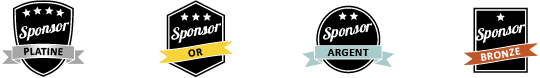
<style>
.page{position:relative;width:540px;height:78px;background:#ffffff}
.page>*{position:absolute;margin:0}
.t1{font:11px "Calibri-Bold";letter-spacing:0.025em;color:#020200}
.t2{font:11px "Calibri-Bold";letter-spacing:0.05em;color:#000000}
.t3{font:11px "Calibri-Bold";letter-spacing:0.05em;color:#ffffff}
</style>
<div class="page">
<p class="t1" style="left:23px;top:47px;width:40px;height:9px">PLATINE</p>
<p class="t2" style="left:188px;top:48px;width:15px;height:9px">OR</p>
<p class="t2" style="left:327px;top:49px;width:42px;height:7px">ARGENT</p>
<p class="t3" style="left:480px;top:47px;width:41px;height:14px">BRONZE</p>
</div>
